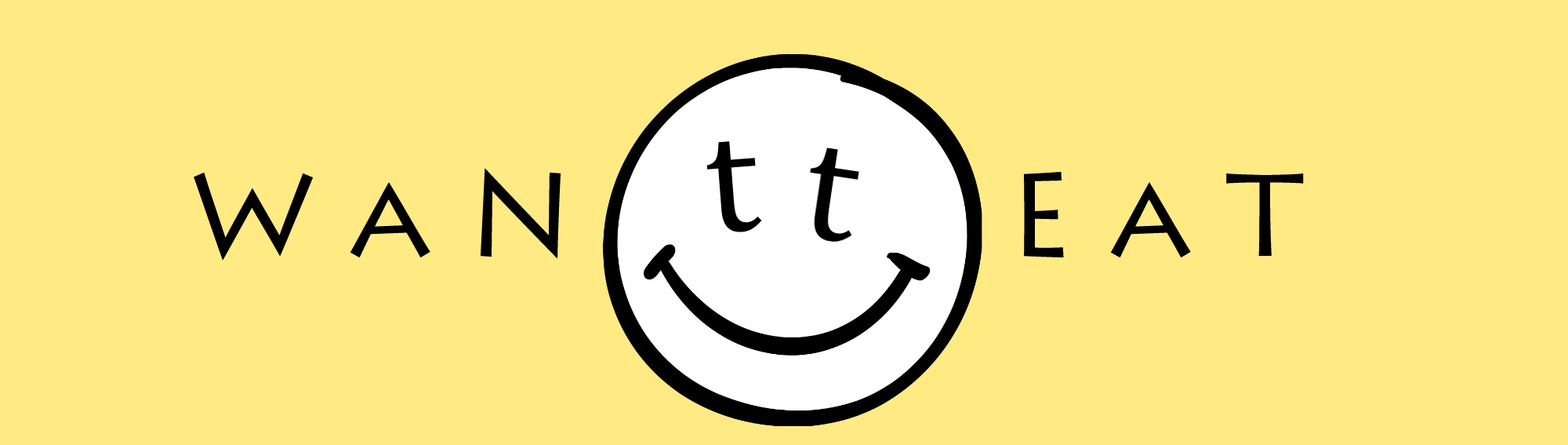
<style>
.page{position:relative;width:1568px;height:445px;background:#ffea84}
.page>*{position:absolute;margin:0}
.t1{font:152.7px "Cambria";color:#000000}
.t2{font:116.8px "LithosPro-Regular";color:#000000}
</style>
<div class="page">
<p class="t1" style="left:706px;top:141px;width:56px;height:91px;rotate:-4deg">t</p>
<p class="t2" style="left:194px;top:168px;width:1110px;height:92px">W a N          E a T</p>
</div>
